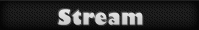
<style>
.page{position:relative;width:199px;height:30px}
.page>*{position:absolute;margin:0}
.t1{font:21.3px "GillSans-UltraBold";color:#d3d3d3;scale:0.89 1}
</style>
<div class="page">
<p class="t1" style="left:57px;top:8px;width:86px;height:17px">Stream</p>
</div>
